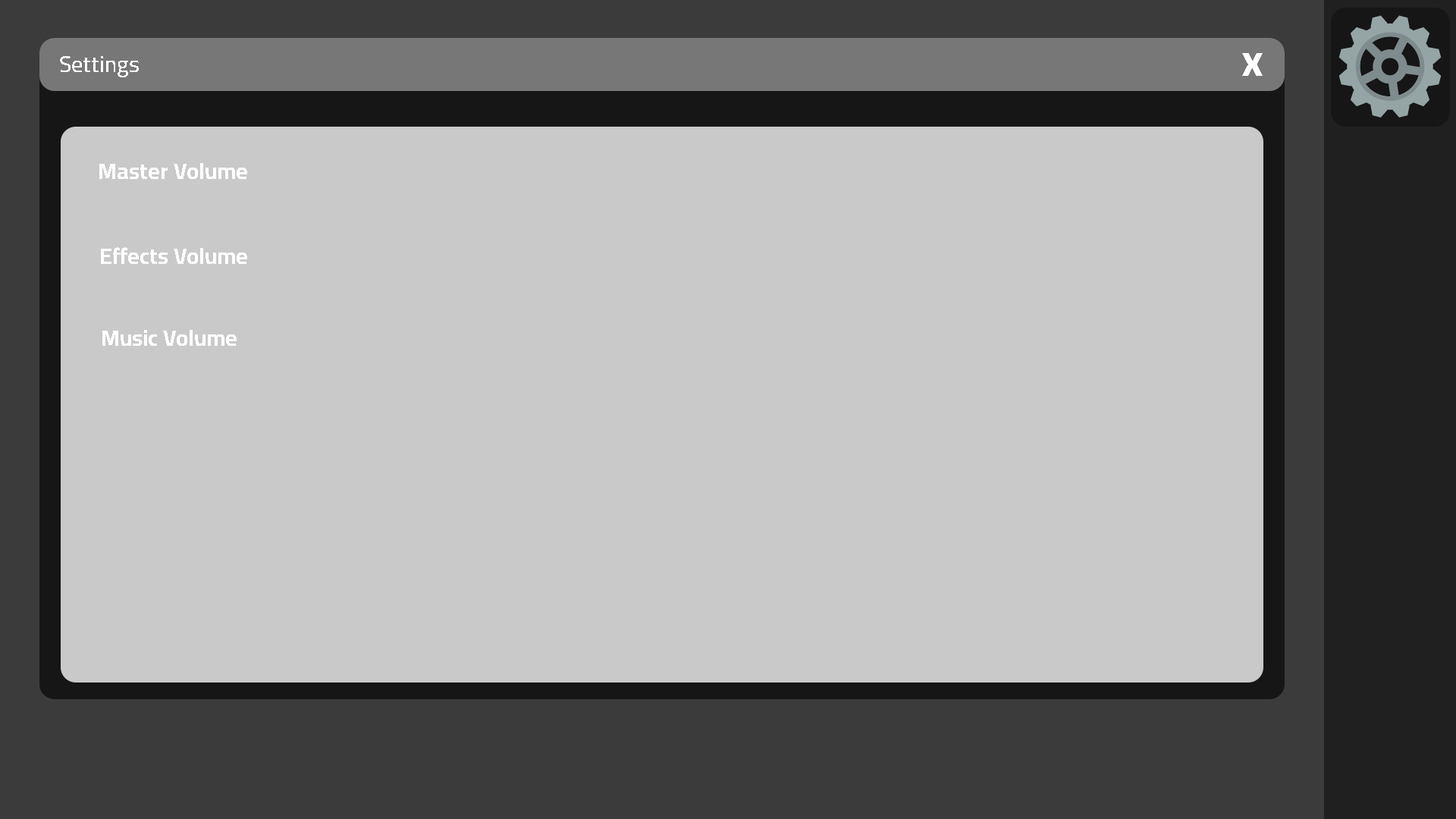
<style>
.page{position:relative;width:1456px;height:819px;background:#c9c9c9}
.page>*{position:absolute;margin:0}
.t1{font:45.5px "Cairo-Bold";color:#ffffff}
.t2{font:22.7px "Cairo-SemiBold";color:#ffffff}
.t3{font:22.7px "Cairo-Bold";color:#ffffff}
</style>
<div class="page">
<p class="t1" style="left:1242px;top:53px;width:21px;height:23px">x</p>
<p class="t2" style="left:60px;top:56px;width:79px;height:21px">Settings</p>
<p class="t3" style="left:99px;top:163px;width:148px;height:16px">Master Volume</p>
<p class="t3" style="left:101px;top:247px;width:146px;height:17px">Effects Volume</p>
<p class="t3" style="left:102px;top:330px;width:135px;height:16px">Music Volume</p>
</div>
